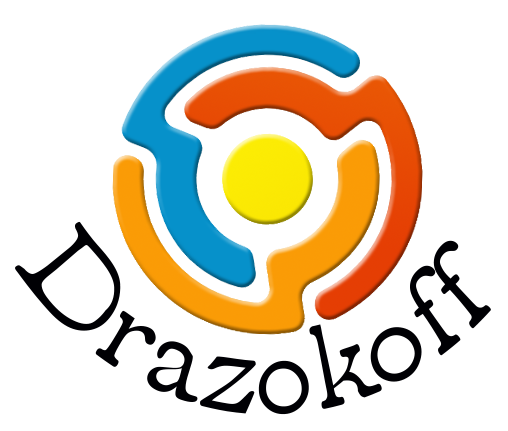
<style>
.page{position:relative;width:508px;height:431px;background:#ffffff}
.page>*{position:absolute;margin:0}
.t1{font:110px "BellMT";color:#000004;scale:0.8 1}
</style>
<div class="page">
<p class="t1" style="left:15px;top:221px;width:476px;height:194px">Drazokoff</p>
</div>
